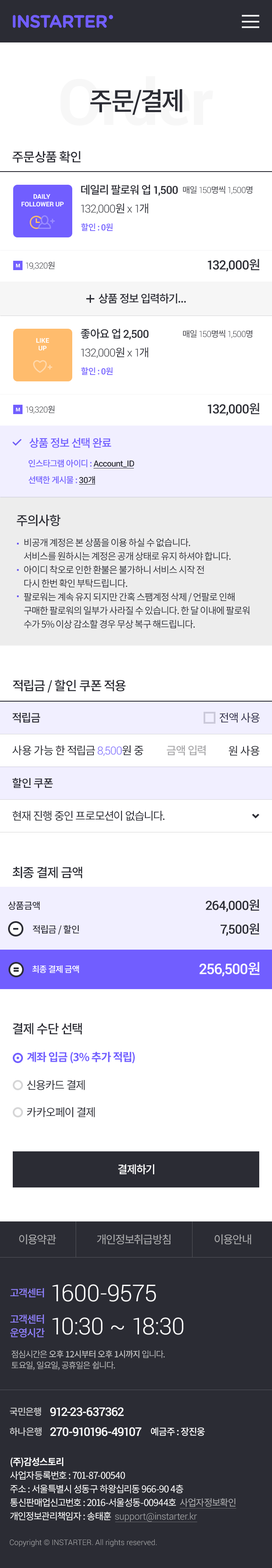
<style>
.page{position:relative;width:272px;height:1568px;background:#ffffff}
.page>*{position:absolute;margin:0}
.t1{font:17.7px "GothamRounded-Bold";letter-spacing:-0.04em;color:#715eff}
.t2{font:25.5px "NotoSansCJKkr-Medium";letter-spacing:-0.04em;color:#2b2c34;text-transform:uppercase}
.t3{font:12.7px "NotoSansCJKkr-Medium";letter-spacing:-0.04em;color:#2b2c34}
.t4{font:11px "NotoSansCJKkr-Medium";letter-spacing:-0.04em;color:#2b2c34}
.t5{font:11px "Roboto-Medium";letter-spacing:-0.04em;color:#2b2c34}
.t6{font:6.4px "Roboto-Bold";color:#ffffff;text-transform:uppercase}
.t7{font:8.5px "Roboto-Light";letter-spacing:-0.04em;color:#2b2c34}
.t8{font:8.5px "NotoSansCJKkr-Regular";letter-spacing:-0.04em;color:#2b2c34}
.t9{font:11px "Roboto-Light";letter-spacing:-0.04em;color:#2b2c34}
.t10{font:11px "NotoSansCJKkr-Regular";letter-spacing:-0.04em;color:#2b2c34}
.t11{font:8.5px "NotoSansCJKkr-Medium";letter-spacing:-0.04em;color:#715eff}
.t12{font:8.5px "Roboto-Medium";letter-spacing:-0.04em;color:#715eff}
.t13{font:5.1px "Roboto-Bold";letter-spacing:-0.04em;color:#ffffff}
.t14{font:12.7px "Roboto-Medium";letter-spacing:-0.04em;color:#2b2c34}
.t15{font:11px "NotoSansCJKkr-Medium";letter-spacing:-0.04em;color:#715eff}
.t16{font:8.5px "Roboto-Medium";letter-spacing:-0.04em;color:#2b2c34}
.t17{font:8.5px "NotoSansCJKkr-Medium";letter-spacing:-0.04em;color:#2b2c34}
.t18{font:9.3px/13.6px "NotoSansCJKkr-Regular";letter-spacing:-0.055em;color:#2b2c34}
.t19{font:11px "Roboto-Light";letter-spacing:-0.04em;color:#705dfd}
.t20{font:11px "NotoSansCJKkr-Medium";letter-spacing:-0.04em;color:#ababad}
.t21{font:9.3px "NotoSansCJKkr-Medium";letter-spacing:-0.04em;color:#2b2c34}
.t22{font:8.5px "NotoSansCJKkr-Medium";letter-spacing:-0.04em;color:#ffffff}
.t23{font:14.4px "Roboto-Medium";letter-spacing:-0.04em;color:#ffffff}
.t24{font:14.4px "NotoSansCJKkr-Medium";letter-spacing:-0.04em;color:#ffffff}
.t25{font:11px "NotoSansCJKkr-Bold";letter-spacing:-0.04em;color:#715eff}
.t26{font:11px "NotoSansCJKkr-Medium";letter-spacing:-0.04em;color:#ffffff}
.t27{font:11px "NotoSansCJKkr-Regular";letter-spacing:-0.04em;color:#abacae}
.t28{font:10.2px "NotoSansCJKkr-Medium";letter-spacing:-0.04em;color:#9182ff}
.t29{font:23.4px "Roboto-Light";color:#ffffff}
.t30{font:10.2px/13.6px "NotoSansCJKkr-Medium";letter-spacing:-0.04em;color:#9182ff}
.t31{font:8.5px/11px "NotoSansCJKkr-Regular";letter-spacing:-0.04em;color:#bebebf}
.t32{font:8.5px/11px "NotoSansCJKkr-Medium";letter-spacing:-0.04em;color:#bebebf}
.t33{font:9.3px "NotoSansCJKkr-Medium";letter-spacing:-0.04em;color:#cfd0d1}
.t34{font:11.9px "Roboto-Medium";letter-spacing:-0.04em;color:#ffffff}
.t35{font:11.9px "NotoSansCJKkr-Medium";letter-spacing:-0.04em;color:#ffffff}
.t36{font:9.3px "NotoSansCJKkr-Medium";letter-spacing:-0.04em;color:#ffffff}
.t37{font:9.3px/13.6px "NotoSansCJKkr-Regular";letter-spacing:-0.04em;color:#ffffff}
.t38{font:9.3px/13.6px "NotoSansCJKkr-Bold";letter-spacing:-0.04em;color:#ffffff}
.t39{font:9.3px/13.6px "NotoSansCJKkr-Regular";letter-spacing:-0.04em;color:#abacae}
.t40{font:9.3px/13.6px "Roboto-Light";color:#abacae}
.t41{font:7.6px "Roboto-Light";color:#abacae}
</style>
<div class="page">
<p class="t1" style="left:13px;top:15px;width:94px;height:13px">INSTARTER</p>
<p class="t2" style="left:90px;top:89px;width:92px;height:26px">주문/결제</p>
<p class="t3" style="left:12px;top:151px;width:69px;height:12px">주문상품 확인</p>
<p class="t4" style="left:81px;top:184px;width:97px;height:12px">데일리 팔로워 업 <span class="t5">1,500</span></p>
<p class="t6" style="left:21px;top:194px;width:43px;height:13px;text-align:center">DAILY <br>Follower UP</p>
<p class="t7" style="left:183px;top:186px;width:69px;height:9px"><span class="t8">매일 </span>150<span class="t8">명씩 </span>1,500<span class="t8">명</span></p>
<p class="t9" style="left:81px;top:203px;width:67px;height:11px">132,000<span class="t10">원 </span>x 1<span class="t10">개</span></p>
<p class="t11" style="left:81px;top:223px;width:32px;height:8px">할인 : <span class="t12">0</span>원</p>
<p class="t13" style="left:16px;top:264px;width:4px;height:4px">M</p>
<p class="t7" style="left:26px;top:262px;width:29px;height:8px">19,320<span class="t8">원</span></p>
<p class="t14" style="left:208px;top:259px;width:51px;height:13px">132,000<span class="t3">원</span></p>
<p class="t4" style="left:99px;top:293px;width:87px;height:11px">상품 정보 입력하기...</p>
<p class="t4" style="left:81px;top:329px;width:68px;height:11px">좋아요 업 <span class="t5">2,500</span></p>
<p class="t7" style="left:183px;top:330px;width:69px;height:8px"><span class="t8">매일 </span>150<span class="t8">명씩 </span>1,500<span class="t8">명</span></p>
<p class="t6" style="left:36px;top:338px;width:13px;height:13px;text-align:center">Like<br>Up</p>
<p class="t9" style="left:81px;top:347px;width:67px;height:11px">132,000<span class="t10">원 </span>x 1<span class="t10">개</span></p>
<p class="t11" style="left:81px;top:367px;width:32px;height:8px">할인 : <span class="t12">0</span>원</p>
<p class="t13" style="left:16px;top:408px;width:4px;height:4px">M</p>
<p class="t7" style="left:26px;top:406px;width:29px;height:8px">19,320<span class="t8">원</span></p>
<p class="t14" style="left:208px;top:403px;width:51px;height:13px">132,000<span class="t3">원</span></p>
<p class="t15" style="left:29px;top:438px;width:82px;height:10px">상품 정보 선택 완료</p>
<p class="t11" style="left:28px;top:459px;width:106px;height:9px">인스타그램 아이디 : <span class="t16">Account_ID</span></p>
<p class="t11" style="left:28px;top:476px;width:67px;height:8px">선택한 게시물 : <span class="t16">30</span><span class="t17">개</span></p>
<p class="t3" style="left:17px;top:514px;width:44px;height:12px">주의사항</p>
<p class="t18" style="left:24px;top:538px;width:225px;height:91px">비공개 계정은 본 상품을 이용 하실 수 없습니다. <br>서비스를 원하시는 계정은 공개 상태로 유지 하셔야 합니다.<br>아이디 착오로 인한 환불은 불가하니 서비스 시작 전<br>다시 한번 확인 부탁드립니다.<br>팔로워는 계속 유지 되지만 간혹 스팸계정 삭제 / 언팔로 인해 <br>구매한 팔로워의 일부가 사라질 수 있습니다. 한 달 이내에 팔로워 <br>수가 5% 이상 감소할 경우 무상 복구 해드립니다.</p>
<p class="t3" style="left:13px;top:680px;width:113px;height:13px">적립금 / 할인 쿠폰 적용</p>
<p class="t4" style="left:12px;top:713px;width:28px;height:10px">적립금</p>
<p class="t10" style="left:219px;top:713px;width:40px;height:10px">전액 사용</p>
<p class="t10" style="left:12px;top:745px;width:131px;height:11px">사용 가능 한 적립금 <span class="t19">8,500</span>원 중</p>
<p class="t20" style="left:166px;top:745px;width:40px;height:11px">금액 입력</p>
<p class="t10" style="left:228px;top:746px;width:31px;height:10px">원 사용</p>
<p class="t4" style="left:12px;top:778px;width:41px;height:10px">할인 쿠폰</p>
<p class="t10" style="left:12px;top:811px;width:152px;height:10px">현재 진행 중인 프로모션이 없습니다.</p>
<p class="t3" style="left:12px;top:866px;width:70px;height:12px">최종 결제 금액</p>
<p class="t21" style="left:8px;top:901px;width:32px;height:9px">상품금액</p>
<p class="t14" style="left:206px;top:899px;width:53px;height:13px">264,000<span class="t3">원</span></p>
<p class="t21" style="left:33px;top:925px;width:46px;height:10px">적립금 / 할인</p>
<p class="t14" style="left:220px;top:923px;width:39px;height:13px">7,500<span class="t3">원</span></p>
<p class="t22" style="left:32px;top:965px;width:47px;height:8px">최종 결제 금액</p>
<p class="t23" style="left:199px;top:962px;width:60px;height:14px">256,500<span class="t24">원</span></p>
<p class="t3" style="left:13px;top:1023px;width:69px;height:12px">결제 수단 선택</p>
<p class="t25" style="left:27px;top:1052px;width:108px;height:11px">계좌 입금 (3% 추가 적립)</p>
<p class="t10" style="left:27px;top:1080px;width:58px;height:10px">신용카드 결제</p>
<p class="t10" style="left:27px;top:1107px;width:68px;height:10px">카카오페이 결제</p>
<p class="t26" style="left:118px;top:1164px;width:36px;height:10px">결제하기</p>
<p class="t27" style="left:19px;top:1234px;width:37px;height:10px">이용약관</p>
<p class="t27" style="left:97px;top:1234px;width:73px;height:10px">개인정보취급방침</p>
<p class="t27" style="left:214px;top:1234px;width:37px;height:10px">이용안내</p>
<p class="t28" style="left:10px;top:1288px;width:34px;height:9px">고객센터</p>
<p class="t29" style="left:52px;top:1284px;width:104px;height:18px">1600-9575</p>
<p class="t30" style="left:10px;top:1314px;width:35px;height:23px">고객센터<br>운영시간</p>
<p class="t29" style="left:52px;top:1317px;width:131px;height:18px">10:30 ~ 18:30</p>
<p class="t31" style="left:11px;top:1350px;width:154px;height:20px">점심시간은<span class="t32"> 오후 12시부터 오후 1시까지</span> 입니다.<br>토요일, 일요일, 공휴일은 쉽니다.</p>
<p class="t33" style="left:10px;top:1407px;width:31px;height:9px">국민은행</p>
<p class="t34" style="left:50px;top:1407px;width:74px;height:9px">912-23-637362</p>
<p class="t33" style="left:10px;top:1427px;width:32px;height:9px">하나은행</p>
<p class="t34" style="left:50px;top:1427px;width:91px;height:9px"><span class="t35"> </span>270-910196-49107</p>
<p class="t36" style="left:151px;top:1427px;width:54px;height:9px">예금주 : 장진웅</p>
<p class="t37" style="left:10px;top:1457px;width:225px;height:65px"><span class="t38">(주)감성스토리</span><br>사업자등록번호 : 701-87-00540          <br>주소 : 서울특별시 성동구 하왕십리동 966-90 4층  <br>통신판매업신고번호 : 2016-서울성동-00944호  <span class="t39">사업자정보확인</span> <br>개인정보관리책임자 : 송태훈  <span class="t40">support@instarter.kr</span></p>
<p class="t41" style="left:10px;top:1539px;width:147px;height:8px">Copyright © INSTARTER. All rights reserved.</p>
</div>
